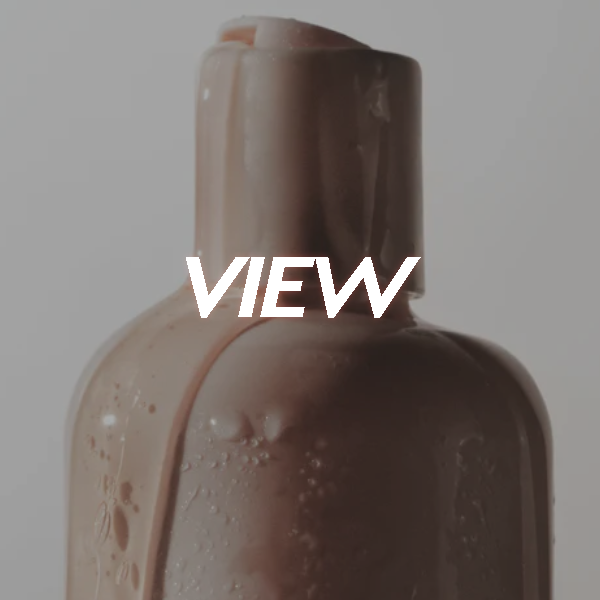
<style>
.page{position:relative;width:600px;height:600px}
.page>*{position:absolute;margin:0}
.t1{font:90px "TTChocolates-DemiBoldIt";letter-spacing:-0.08em;color:#ffffff;scale:1.26 1}
</style>
<div class="page">
<p class="t1" style="left:186px;top:257px;width:235px;height:61px">VIEW</p>
</div>
